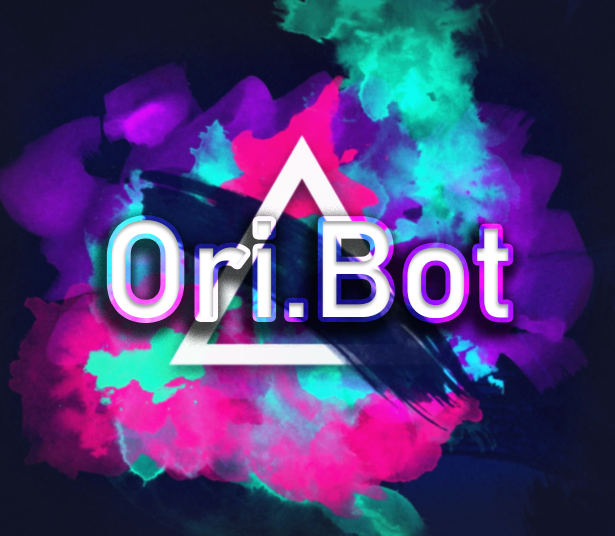
<style>
.page{position:relative;width:615px;height:536px}
.page>*{position:absolute;margin:0}
.t1{font:135.3px "Bahnschrift";color:#ffffff}
</style>
<div class="page">
<p class="t1" style="left:111px;top:220px;width:398px;height:98px">Ori.Bot</p>
</div>
